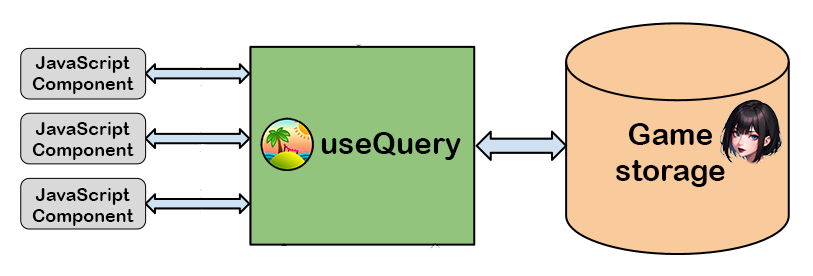
<style>
.page{position:relative;width:813px;height:276px;background:#ffffff}
.page>*{position:absolute;margin:0}
.t1{font:18px "ArialRoundedMTBold";color:#000000}
.t2{font:30px "ArialRoundedMTBold";color:#000000}
</style>
<div class="page">
<p class="t1" style="left:32px;top:56px;width:102px;height:38px;text-align:center">JavaScript<br>Component</p>
<p class="t1" style="left:32px;top:122px;width:102px;height:38px;text-align:center">JavaScript<br>Component</p>
<p class="t2" style="left:616px;top:123px;width:109px;height:64px;text-align:center">Game<br>storage</p>
<p class="t2" style="left:321px;top:132px;width:140px;height:28px">useQuery</p>
<p class="t1" style="left:32px;top:188px;width:102px;height:38px;text-align:center">JavaScript<br>Component</p>
</div>
